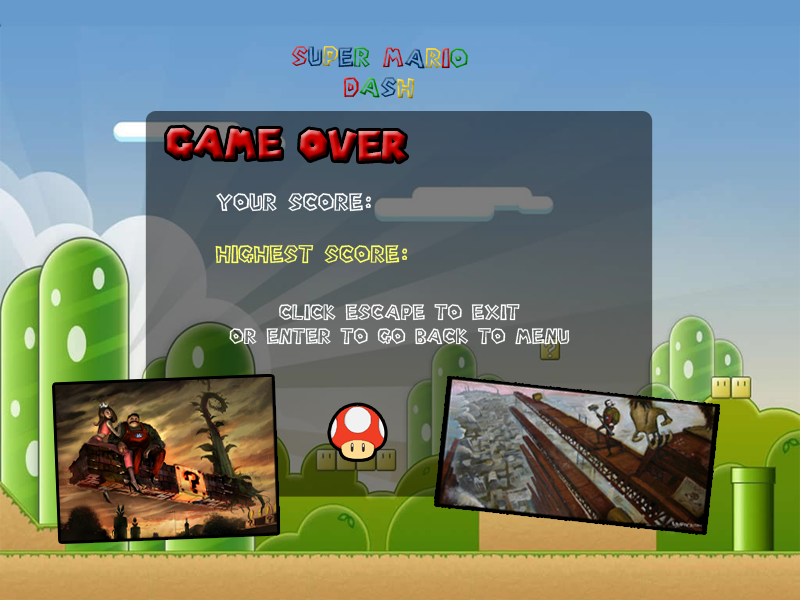
<style>
.page{position:relative;width:800px;height:600px}
.page>*{position:absolute;margin:0}
.t1{font:25.1px "Super-Mario-Bros.-Regular"}
.t2{font:22.2px "Super-Mario-Bros.-Regular";color:#ffffff}
.t3{font:22.2px "Super-Mario-Bros.-Regular";color:#ffff66}
.t4{font:19.6px "Super-Mario-Bros.-Regular";color:#ffffff}
</style>
<div class="page">
<p class="t1" style="left:291px;top:46px;width:177px;height:53px;text-align:center;rotate:1deg">SUPER MARIO<br>DASH</p>
<p class="t2" style="left:216px;top:193px;width:155px;height:19px">Your SCORE:</p>
<p class="t3" style="left:215px;top:245px;width:193px;height:19px">HIGHEST SCORE:</p>
<p class="t4" style="left:229px;top:304px;width:341px;height:41px;text-align:center">click escape to exit<br>or enter to go back to menu</p>
</div>
